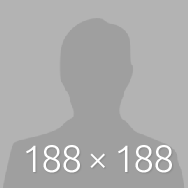
<style>
.page{position:relative;width:188px;height:188px;background:#b3b3b3}
.page>*{position:absolute;margin:0}
.t1{font:38px "Ubuntu-Light";letter-spacing:-0.05em;color:#ffffff}
</style>
<div class="page">
<p class="t1" style="left:26px;top:145px;width:146px;height:28px">188 × 188</p>
</div>
